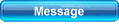
<style>
.page{position:relative;width:119px;height:25px}
.page>*{position:absolute;margin:0}
.t1{font:12px "Arial-BoldMT";color:#ffffff}
</style>
<div class="page">
<p class="t1" style="left:34px;top:6px;width:50px;height:12px">Message</p>
</div>
